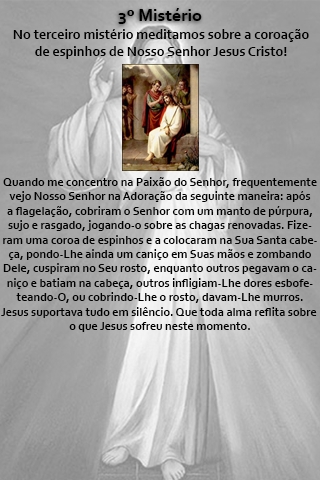
<style>
.page{position:relative;width:320px;height:480px}
.page>*{position:absolute;margin:0}
.t1{font:18px "Corbel-Bold";color:#000000}
.t2{font:14px "Corbel-Bold";color:#000000}
.t3{font:12px "Corbel-Bold";color:#000000}
</style>
<div class="page">
<p class="t1" style="left:118px;top:8px;width:84px;height:16px">3º Mistério</p>
<p class="t2" style="left:13px;top:29px;width:296px;height:30px;text-align:center">No terceiro mistério meditamos sobre a coroação<br>de espinhos de Nosso Senhor Jesus Cristo!</p>
<p class="t3" style="left:1px;top:177px;width:316px;height:155px;text-align:center">Quando me concentro na Paixão do Senhor, frequentemente<br>vejo Nosso Senhor na Adoração da seguinte maneira: após<br>a flagelação, cobriram o Senhor com um manto de púrpura,<br>sujo e rasgado, jogando-o sobre as chagas renovadas. Fize-<br>ram uma coroa de espinhos e a colocaram na Sua Santa cabe-<br>ça, pondo-Lhe ainda um caniço em Suas mãos e zombando<br>Dele, cuspiram no Seu rosto, enquanto outros pegavam o ca-<br>niço e batiam na cabeça, outros infligiam-Lhe dores esbofe-<br>teando-O, ou cobrindo-Lhe o rosto, davam-Lhe murros.<br>Jesus suportava tudo em silêncio. Que toda alma reflita sobre <br>o que Jesus sofreu neste momento.</p>
</div>
